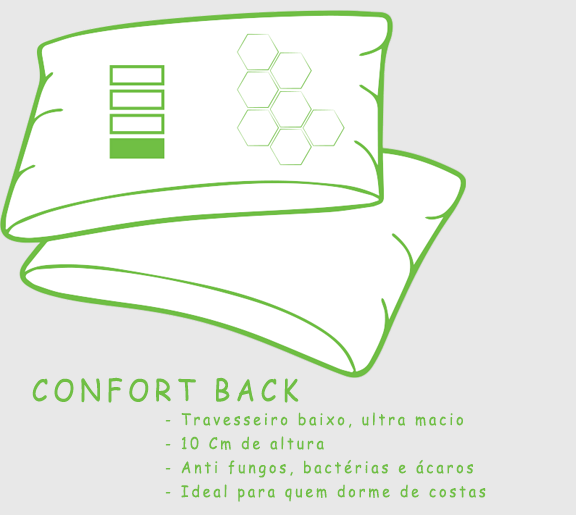
<style>
.page{position:relative;width:576px;height:515px;background:#e8e8e8}
.page>*{position:absolute;margin:0}
.t1{font:16px/24px "ComicSansMS";letter-spacing:0.2em;color:#70bf44;scale:0.89 1}
.t2{font:30px/4.1px "ComicSansMS";letter-spacing:0.2em;color:#70bf44;scale:0.89 1}
</style>
<div class="page">
<p class="t1" style="left:32px;top:377px;width:454px;height:125px;text-align:center"><span class="t2">CONFORT BACK<br></span>- Travesseiro baixo, ultra macio<br>- 10 Cm de altura<br>- Anti fungos, bactérias e ácaros<br>- Ideal para quem dorme de costas</p>
</div>
